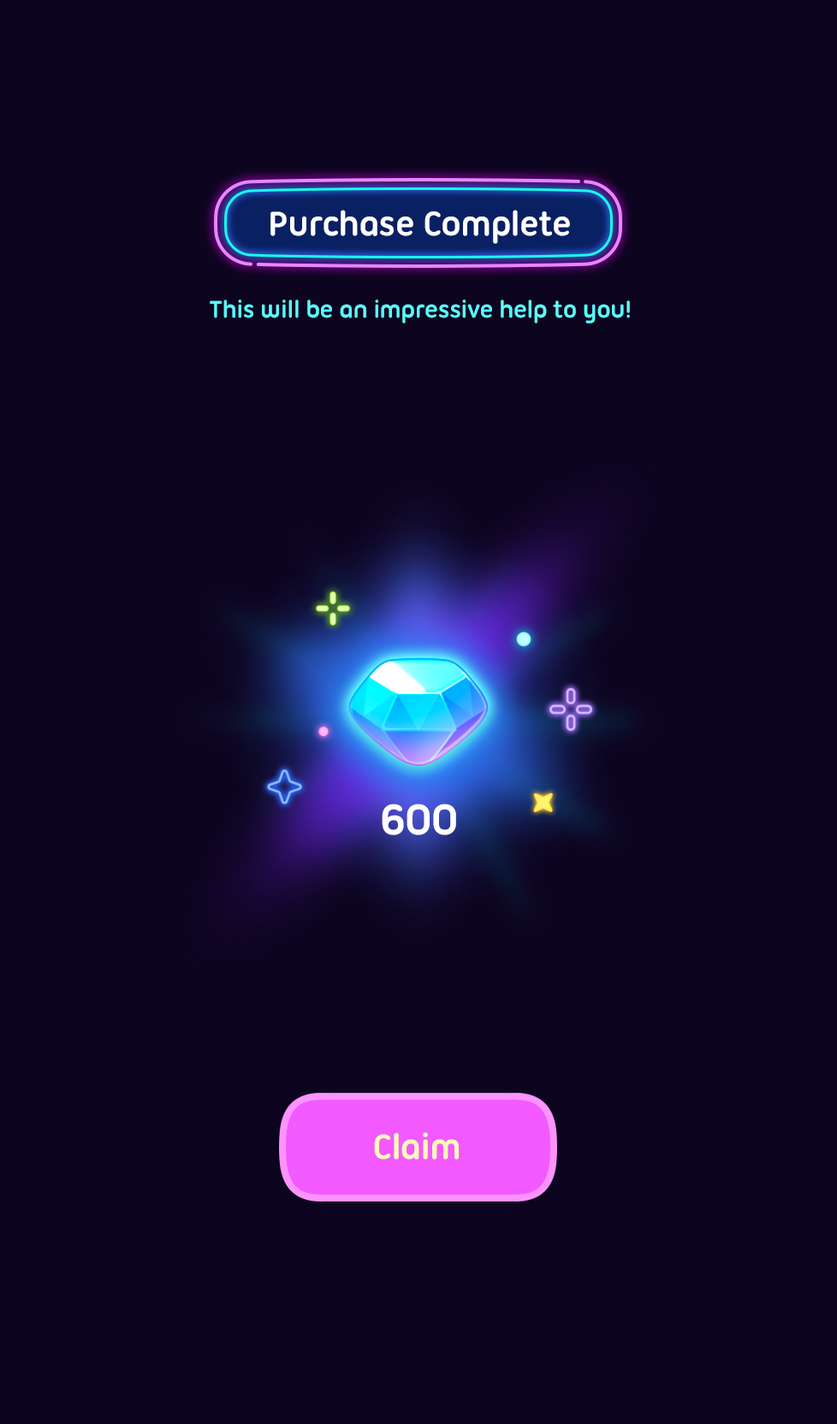
<style>
.page{position:relative;width:837px;height:1424px;background:#0d0420}
.page>*{position:absolute;margin:0}
.t1{font:36.8px "UbuntuTitling-Bold";letter-spacing:-0.025em;color:#ffffff}
.t2{font:25.7px "UbuntuTitling-Bold";letter-spacing:-0.025em;color:#5afdff}
.t3{font:46.2px "UbuntuTitling-Bold";letter-spacing:-0.025em;color:#ffffff}
.t4{font:37.7px "UbuntuTitling-Bold";letter-spacing:-0.025em;color:#fefbb7}
</style>
<div class="page">
<p class="t1" style="left:270px;top:210px;width:300px;height:34px">Purchase Complete</p>
<p class="t2" style="left:210px;top:300px;width:420px;height:24px">This will be an impressive help to you!</p>
<p class="t3" style="left:382px;top:804px;width:74px;height:31px">600</p>
<p class="t4" style="left:374px;top:1132px;width:85px;height:28px">Claim</p>
</div>
